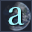
<style>
.page{position:relative;width:32px;height:32px}
.page>*{position:absolute;margin:0}
.t1{font:36px "YuMin-Medium";color:#a7f7fe}
</style>
<div class="page">
<p class="t1" style="left:8px;top:7px;width:16px;height:18px">a</p>
</div>
